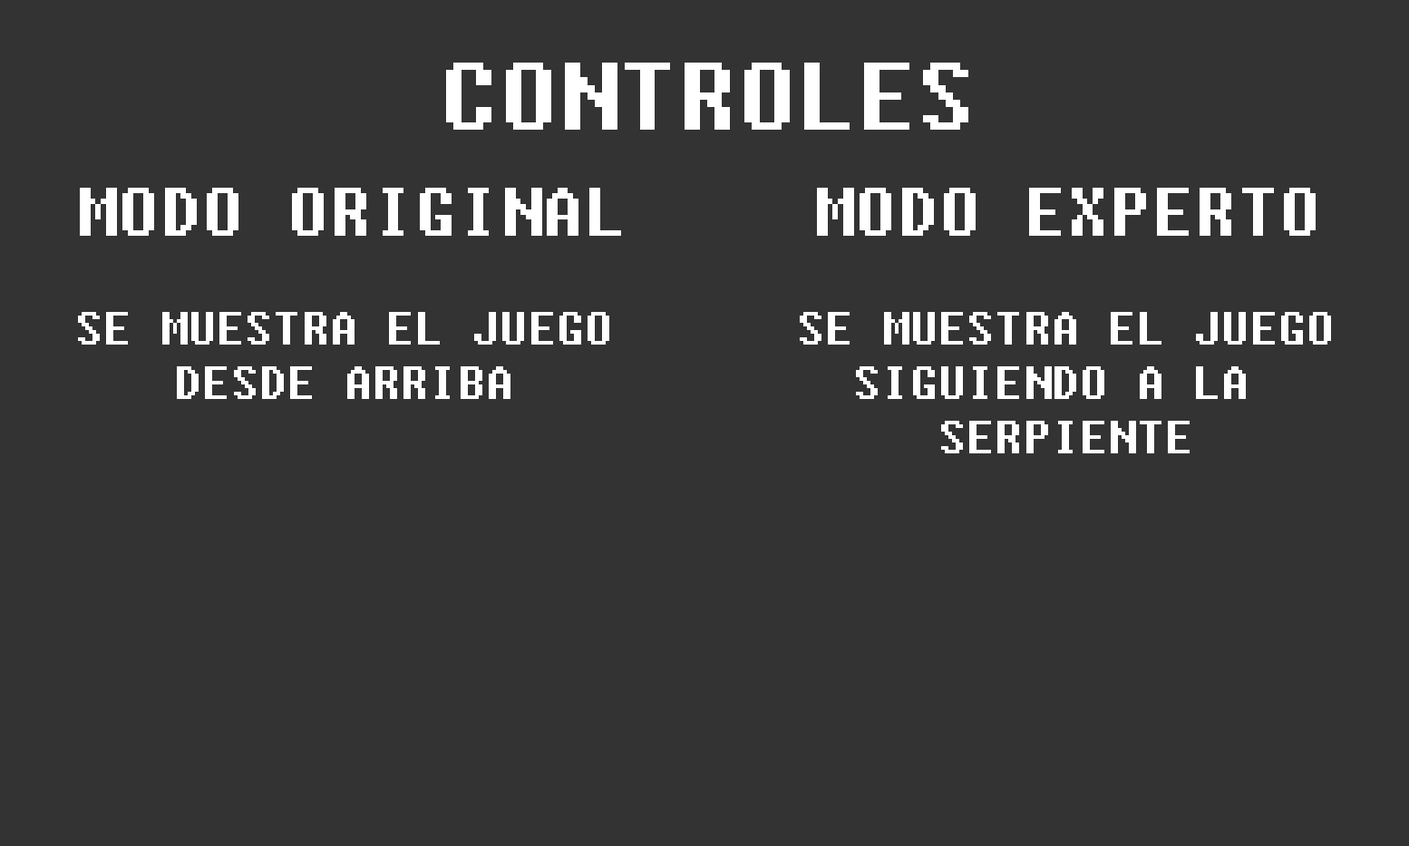
<style>
.page{position:relative;width:1409px;height:846px;background:#333333}
.page>*{position:absolute;margin:0}
.t1{font:95.5px "Fixedsys";color:#ffffff}
.t2{font:68px "Fixedsys";color:#ffffff}
.t3{font:45.3px "Fixedsys";color:#ffffff}
</style>
<div class="page">
<p class="t1" style="left:446px;top:63px;width:523px;height:67px">CONTROLES</p>
<p class="t2" style="left:80px;top:188px;width:541px;height:48px">MODO ORIGINAL</p>
<p class="t2" style="left:817px;top:188px;width:499px;height:48px">MODO EXPERTO</p>
<p class="t3" style="left:78px;top:312px;width:531px;height:87px;text-align:center">SE MUESTRA EL JUEGO<br>DESDE ARRIBA</p>
<p class="t3" style="left:800px;top:312px;width:531px;height:141px;text-align:center">SE MUESTRA EL JUEGO<br>SIGUIENDO A LA <br>SERPIENTE</p>
</div>
